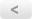
<style>
.page{position:relative;width:32px;height:19px}
.page>*{position:absolute;margin:0}
.t1{font:16px "FranklinGothic-Medium";color:#999999}
</style>
<div class="page">
<p class="t1" style="left:11px;top:5px;width:7px;height:9px">&lt;</p>
</div>
